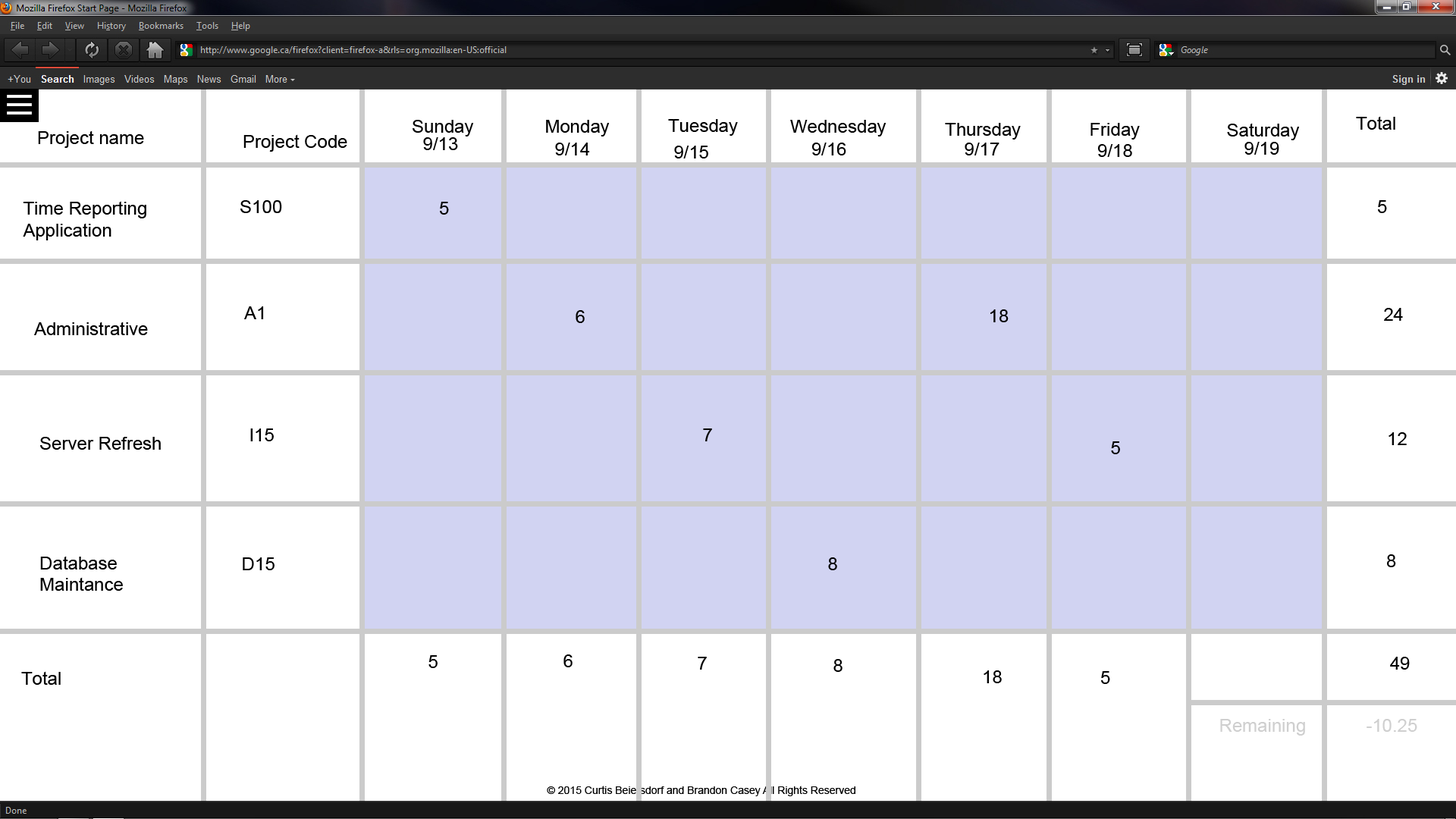
<style>
.page{position:relative;width:1456px;height:819px;background:#ffffff}
.page>*{position:absolute;margin:0}
.t1{font:18.2px "ArialMT";color:#000000}
.t2{font:18.2px "ArialMT";color:#cfcfcf}
</style>
<div class="page">
<p class="t1" style="left:413px;top:120px;width:61px;height:16px">Sunday</p>
<p class="t1" style="left:546px;top:120px;width:64px;height:16px">Monday</p>
<p class="t1" style="left:668px;top:119px;width:70px;height:17px">Tuesday</p>
<p class="t1" style="left:790px;top:120px;width:96px;height:16px">Wednesday</p>
<p class="t1" style="left:945px;top:123px;width:76px;height:17px">Thursday</p>
<p class="t1" style="left:1090px;top:123px;width:50px;height:17px">Friday</p>
<p class="t1" style="left:1227px;top:123px;width:73px;height:17px">Saturday</p>
<p class="t1" style="left:1356px;top:116px;width:39px;height:14px">Total</p>
<p class="t1" style="left:38px;top:130px;width:106px;height:18px">Project name</p>
<p class="t1" style="left:243px;top:134px;width:104px;height:18px">Project Code</p>
<p class="t1" style="left:423px;top:137px;width:35px;height:13px">9/13</p>
<p class="t1" style="left:555px;top:143px;width:35px;height:12px">9/14</p>
<p class="t1" style="left:674px;top:146px;width:34px;height:12px">9/15</p>
<p class="t1" style="left:811px;top:143px;width:35px;height:12px">9/16</p>
<p class="t1" style="left:965px;top:143px;width:34px;height:12px">9/17</p>
<p class="t1" style="left:1097px;top:144px;width:35px;height:13px">9/18</p>
<p class="t1" style="left:1244px;top:142px;width:35px;height:13px">9/19</p>
<p class="t1" style="left:23px;top:201px;width:123px;height:39px">Time Reporting<br>Application</p>
<p class="t1" style="left:240px;top:200px;width:42px;height:13px">S100</p>
<p class="t1" style="left:440px;top:202px;width:9px;height:13px">5</p>
<p class="t1" style="left:1378px;top:200px;width:9px;height:13px">5</p>
<p class="t1" style="left:244px;top:306px;width:20px;height:13px">A1</p>
<p class="t1" style="left:576px;top:310px;width:9px;height:13px">6</p>
<p class="t1" style="left:990px;top:309px;width:19px;height:13px">18</p>
<p class="t1" style="left:1384px;top:308px;width:19px;height:13px">24</p>
<p class="t1" style="left:34px;top:322px;width:114px;height:13px">Administrative</p>
<p class="t1" style="left:40px;top:437px;width:121px;height:13px">Server Refresh</p>
<p class="t1" style="left:250px;top:428px;width:24px;height:13px">I15</p>
<p class="t1" style="left:703px;top:428px;width:9px;height:13px">7</p>
<p class="t1" style="left:1388px;top:432px;width:19px;height:13px">12</p>
<p class="t1" style="left:1111px;top:441px;width:9px;height:13px">5</p>
<p class="t1" style="left:40px;top:556px;width:83px;height:35px">Database<br>Maintance</p>
<p class="t1" style="left:243px;top:557px;width:32px;height:13px">D15</p>
<p class="t1" style="left:828px;top:557px;width:9px;height:13px">8</p>
<p class="t1" style="left:1387px;top:554px;width:9px;height:13px">8</p>
<p class="t1" style="left:428px;top:655px;width:10px;height:13px">5</p>
<p class="t1" style="left:563px;top:654px;width:10px;height:13px">6</p>
<p class="t1" style="left:698px;top:657px;width:9px;height:13px">7</p>
<p class="t1" style="left:833px;top:659px;width:9px;height:13px">8</p>
<p class="t1" style="left:1390px;top:657px;width:20px;height:13px">49</p>
<p class="t1" style="left:21px;top:671px;width:40px;height:14px">Total</p>
<p class="t1" style="left:984px;top:670px;width:18px;height:13px">18</p>
<p class="t1" style="left:1101px;top:671px;width:9px;height:13px">5</p>
<p class="t2" style="left:1220px;top:719px;width:85px;height:17px">Remaining</p>
<p class="t2" style="left:1366px;top:719px;width:51px;height:13px">-10.25</p>
</div>
